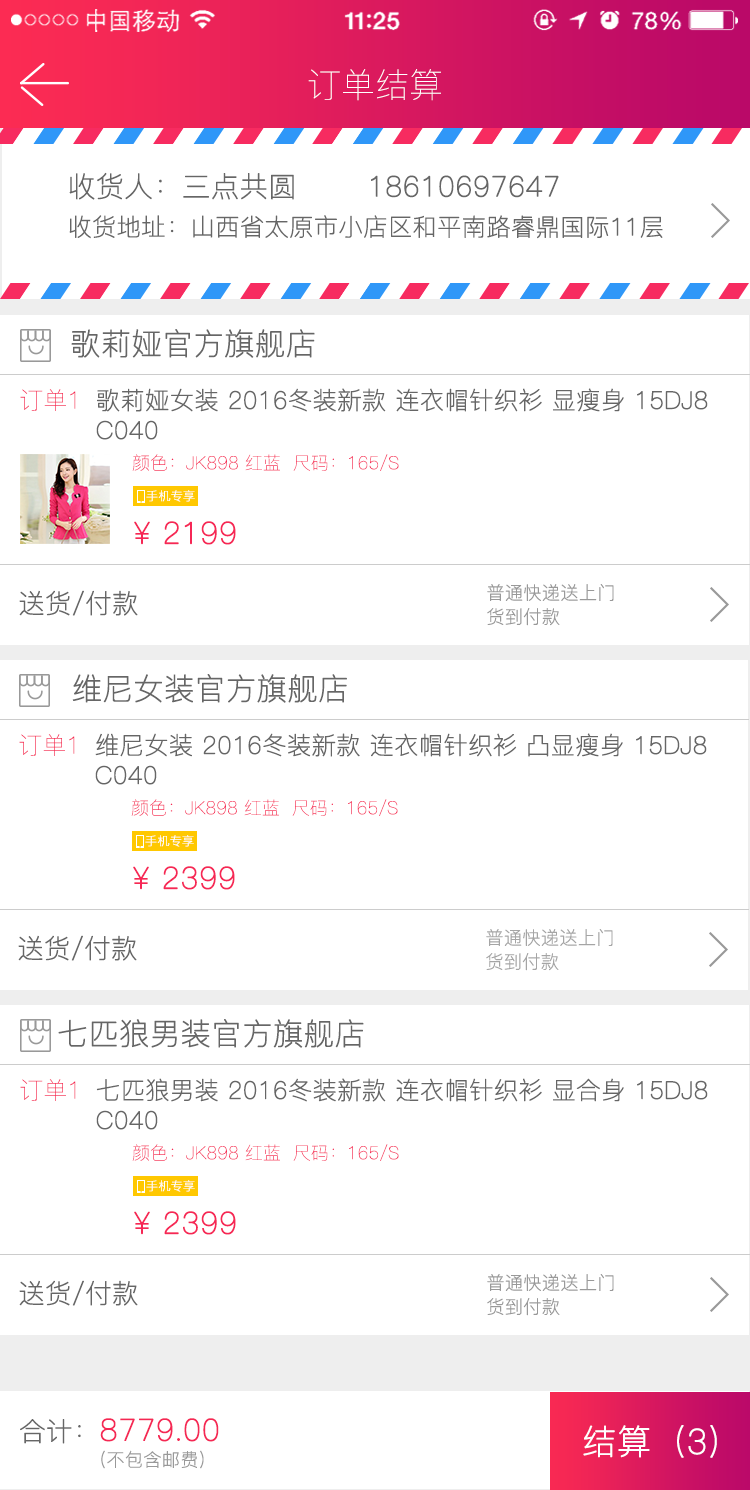
<style>
.page{position:relative;width:750px;height:1490px;background:#ffffff}
.page>*{position:absolute;margin:0}
.t1{font:34px "PingFang-SC-ExtraLight";color:#ffffff}
.t2{font:28px "PingFang-SC-ExtraLight";color:#666666;font-weight:bold}
.t3{font:24px "PingFang-SC-ExtraLight";color:#666666;font-weight:bold}
.t4{font:30px "PingFang-SC-ExtraLight";color:#666666;font-weight:bold}
.t5{font:24px "PingFang-SC-ExtraLight";color:#f62855}
.t6{font:24px/30px "PingFang-SC-ExtraLight";color:#666666;font-weight:bold}
.t7{font:18px "PingFang-SC-ExtraLight";color:#f62855}
.t8{font:12px "PingFang-SC-Light";color:#ffffff;font-weight:bold}
.t9{font:30px "PingFang-SC-ExtraLight";color:#f62756;font-weight:bold}
.t10{font:26px "PingFang-SC-ExtraLight";color:#666666;font-weight:bold}
.t11{font:18px/24px "PingFang-SC-ExtraLight";color:#999999;font-weight:bold}
.t12{font:30px "PingFang-SC-ExtraLight";color:#f52755;font-weight:bold}
.t13{font:34px "PingFang-SC-ExtraLight";color:#ffffff;font-weight:bold}
.t14{font:18px "PingFang-SC-ExtraLight";color:#999999;font-weight:bold}
</style>
<div class="page">
<p class="t1" style="left:308px;top:69px;width:133px;height:32px">订单结算</p>
<p class="t2" style="left:69px;top:172px;width:490px;height:28px">收货人：三点共圆       18610697647</p>
<p class="t3" style="left:69px;top:215px;width:594px;height:24px">收货地址：山西省太原市小店区和平南路睿鼎国际11层</p>
<p class="t4" style="left:71px;top:329px;width:244px;height:29px">歌莉娅官方旗舰店</p>
<p class="t5" style="left:20px;top:389px;width:56px;height:22px">订单1</p>
<p class="t6" style="left:96px;top:388px;width:612px;height:52px">歌莉娅女装 2016冬装新款 连衣帽针织衫 显瘦身 15DJ8<br>C040</p>
<p class="t7" style="left:132px;top:454px;width:267px;height:17px">颜色：JK898 红蓝  尺码：165/S</p>
<p class="t8" style="left:146px;top:490px;width:49px;height:12px">手机专享</p>
<p class="t9" style="left:134px;top:521px;width:102px;height:24px">¥ 2199</p>
<p class="t10" style="left:19px;top:590px;width:119px;height:26px">送货/付款</p>
<p class="t11" style="left:487px;top:584px;width:127px;height:42px">普通快递送上门<br>货到付款</p>
<p class="t4" style="left:72px;top:674px;width:275px;height:29px">维尼女装官方旗舰店</p>
<p class="t5" style="left:19px;top:734px;width:56px;height:22px">订单1</p>
<p class="t6" style="left:95px;top:733px;width:612px;height:52px">维尼女装 2016冬装新款 连衣帽针织衫 凸显瘦身 15DJ8<br>C040</p>
<p class="t7" style="left:131px;top:799px;width:267px;height:17px">颜色：JK898 红蓝  尺码：165/S</p>
<p class="t8" style="left:145px;top:835px;width:49px;height:12px">手机专享</p>
<p class="t9" style="left:133px;top:866px;width:102px;height:24px">¥ 2399</p>
<p class="t11" style="left:486px;top:929px;width:127px;height:42px;opacity:0.9">普通快递送上门<br>货到付款</p>
<p class="t10" style="left:18px;top:935px;width:119px;height:26px">送货/付款</p>
<p class="t4" style="left:58px;top:1019px;width:306px;height:29px">七匹狼男装官方旗舰店</p>
<p class="t5" style="left:20px;top:1079px;width:56px;height:22px">订单1</p>
<p class="t6" style="left:96px;top:1078px;width:612px;height:52px">七匹狼男装 2016冬装新款 连衣帽针织衫 显合身 15DJ8<br>C040</p>
<p class="t7" style="left:132px;top:1144px;width:267px;height:17px">颜色：JK898 红蓝  尺码：165/S</p>
<p class="t8" style="left:146px;top:1180px;width:49px;height:12px">手机专享</p>
<p class="t9" style="left:134px;top:1211px;width:102px;height:24px">¥ 2399</p>
<p class="t11" style="left:487px;top:1274px;width:127px;height:42px">普通快递送上门<br>货到付款</p>
<p class="t10" style="left:19px;top:1280px;width:119px;height:26px">送货/付款</p>
<p class="t12" style="left:20px;top:1418px;width:199px;height:26px"><span class="t10">合计：</span>8779.00</p>
<p class="t13" style="left:583px;top:1425px;width:134px;height:33px">结算（3）</p>
<p class="t14" style="left:101px;top:1450px;width:103px;height:19px">（不包含邮费）</p>
</div>
